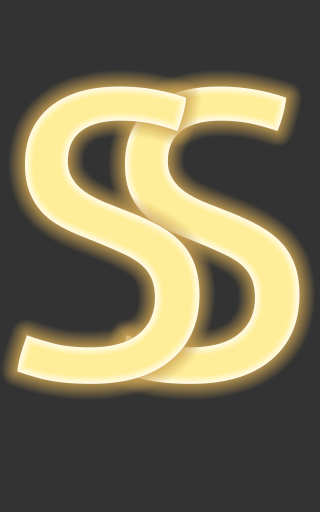
<style>
.page{position:relative;width:320px;height:512px;background:#333333}
.page>*{position:absolute;margin:0}
.t1{font:400px "Aller-Regular"}
</style>
<div class="page">
<p class="t1" style="left:17px;top:86px;width:183px;height:298px">S</p>
<p class="t1" style="left:117px;top:86px;width:183px;height:298px">S</p>
</div>
